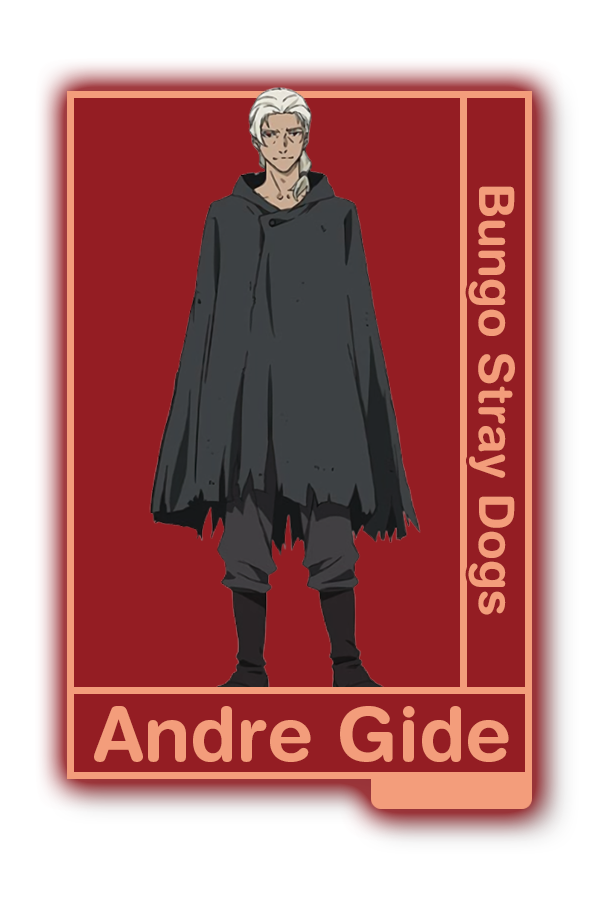
<style>
.page{position:relative;width:600px;height:900px;background:#941d23}
.page>*{position:absolute;margin:0}
.t1{font:48.8px "HelveticaRounded-Bold";color:#f39d7b}
.t2{font:75.7px "HelveticaRounded-Bold";color:#f39d7b}
</style>
<div class="page">
<p class="t1" style="left:468px;top:186px;width:47px;height:429px;rotate:90deg">Bungo Stray Dogs</p>
<p class="t2" style="left:94px;top:706px;width:415px;height:56px">Andre Gide</p>
</div>
